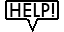
<style>
.page{position:relative;width:64px;height:32px;background:#ffffff}
.page>*{position:absolute;margin:0}
.t1{font:18px "Futura-Medium";color:#000000}
</style>
<div class="page">
<p class="t1" style="left:10px;top:3px;width:45px;height:14px">HELP!</p>
</div>
